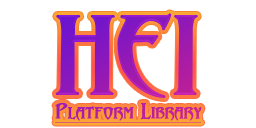
<style>
.page{position:relative;width:256px;height:128px;background:#ffffff}
.page>*{position:absolute;margin:0}
.t1{font:33.8px/11.3px "Abaddon";letter-spacing:-0.01em;font-weight:bold;text-decoration:underline}
.t2{font:101.5px/11.3px "Abaddon";letter-spacing:-0.01em;text-transform:uppercase;font-weight:bold}
</style>
<div class="page">
<p class="t1" style="left:55px;top:13px;width:147px;height:110px;text-align:center"><span class="t2">Hei<br></span>Platform Library</p>
</div>
